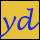
<style>
.page{position:relative;width:40px;height:40px;background:#e7c13a}
.page>*{position:absolute;margin:0}
.t1{font:26px "LucidaHandwriting-Italic";color:#1c2dd6}
</style>
<div class="page">
<p class="t1" style="left:0px;top:7px;width:42px;height:31px">yd</p>
</div>
